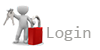
<style>
.page{position:relative;width:100px;height:50px;background:#ffffff}
.page>*{position:absolute;margin:0}
.t1{font:16.7px "Consolas";color:#a3a29f}
</style>
<div class="page">
<p class="t1" style="left:47px;top:26px;width:44px;height:15px">Login</p>
</div>
